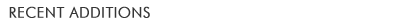
<style>
.page{position:relative;width:400px;height:24px;background:#ffffff}
.page>*{position:absolute;margin:0}
.t1{font:14.7px "FuturaBT-Light";letter-spacing:0.025em;color:#363636;text-transform:uppercase;font-weight:bold}
</style>
<div class="page">
<p class="t1" style="left:9px;top:6px;width:141px;height:12px">RECENT ADDITIONS</p>
</div>
